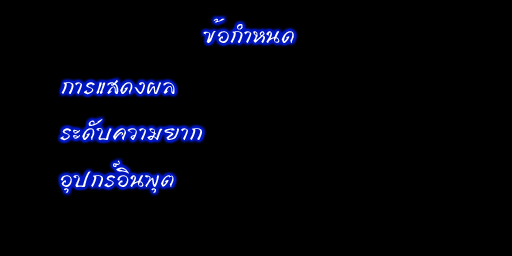
<style>
.page{position:relative;width:512px;height:256px;background:#000000}
.page>*{position:absolute;margin:0}
.t1{font:30px "DsSupasawatD";color:#ffffff}
</style>
<div class="page">
<p class="t1" style="left:203px;top:18px;width:91px;height:25px">¢éÍ¡ÓË¹´</p>
<p class="t1" style="left:61px;top:80px;width:114px;height:15px">¡ÒÃáÊ´§¼Å</p>
<p class="t1" style="left:60px;top:118px;width:142px;height:23px">ÃÐ´Ñº¤ÇÒÁÂÒ¡</p>
<p class="t1" style="left:60px;top:160px;width:114px;height:34px">ÍØ»¡ÃìÍÔ¹¾Øµ</p>
</div>
